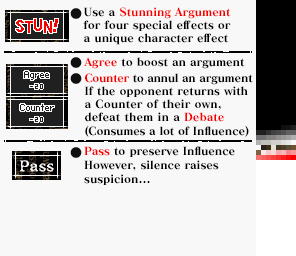
<style>
.page{position:relative;width:296px;height:256px;background:#f8f8f8}
.page>*{position:absolute;margin:0}
.t1{font:11px/13px "MatissePro-EB";letter-spacing:-0.01em;color:#000000}
.t2{font:11px/13px "MatissePro-EB";letter-spacing:-0.01em;color:#f80000}
.t3{font:11px/13px "MatissePro-EB";color:#000000}
.t4{font:11px/14px "MatissePro-EB";letter-spacing:-0.01em;color:#f80000}
.t5{font:11px/14px "MatissePro-EB";letter-spacing:-0.01em;color:#000000}
.t6{font:11px/13px "MatissePro-EB";letter-spacing:-0.035em;color:#f80000}
.t7{font:11px/13px "MatissePro-EB";letter-spacing:-0.035em;color:#000000}
.t8{font:11px/13px "MatissePro-EB";letter-spacing:-0.04em;color:#000000}
.t9{font:11px/14px "MatissePro-EB";letter-spacing:-0.025em;color:#000000}
.t10{font:11px/13px "MatissePro-EB";color:#f80000}
.t11{font:11px/13px "MatissePro-EB";letter-spacing:-0.025em;color:#000000}
</style>
<div class="page">
<p class="t1" style="left:83px;top:7px;width:148px;height:38px">Use a <span class="t2">Stunning Argument<br></span>for four special <span class="t3">eff</span>ects or<br>a unique character effect</p>
<p class="t3" style="left:84px;top:57px;width:169px;height:80px"><span class="t4">Agree</span><span class="t5"> to boost an argument<br> <br></span><span class="t6">Counter</span><span class="t7"> to </span><span class="t8">annul</span><span class="t7"> an </span><span class="t9">argument<br></span><span class="t1">If the opponent returns with<br></span>a Counter of their own,<br>defeat them in a <span class="t10">Debate<br></span><span class="t11">(Consumes a lot of </span><span class="t1">Influence</span><span class="t5">)</span></p>
<p class="t5" style="left:84px;top:146px;width:151px;height:39px"><span class="t4">Pass</span> to preserve Influence<br>However, silence raises<br>suspicion...</p>
</div>
